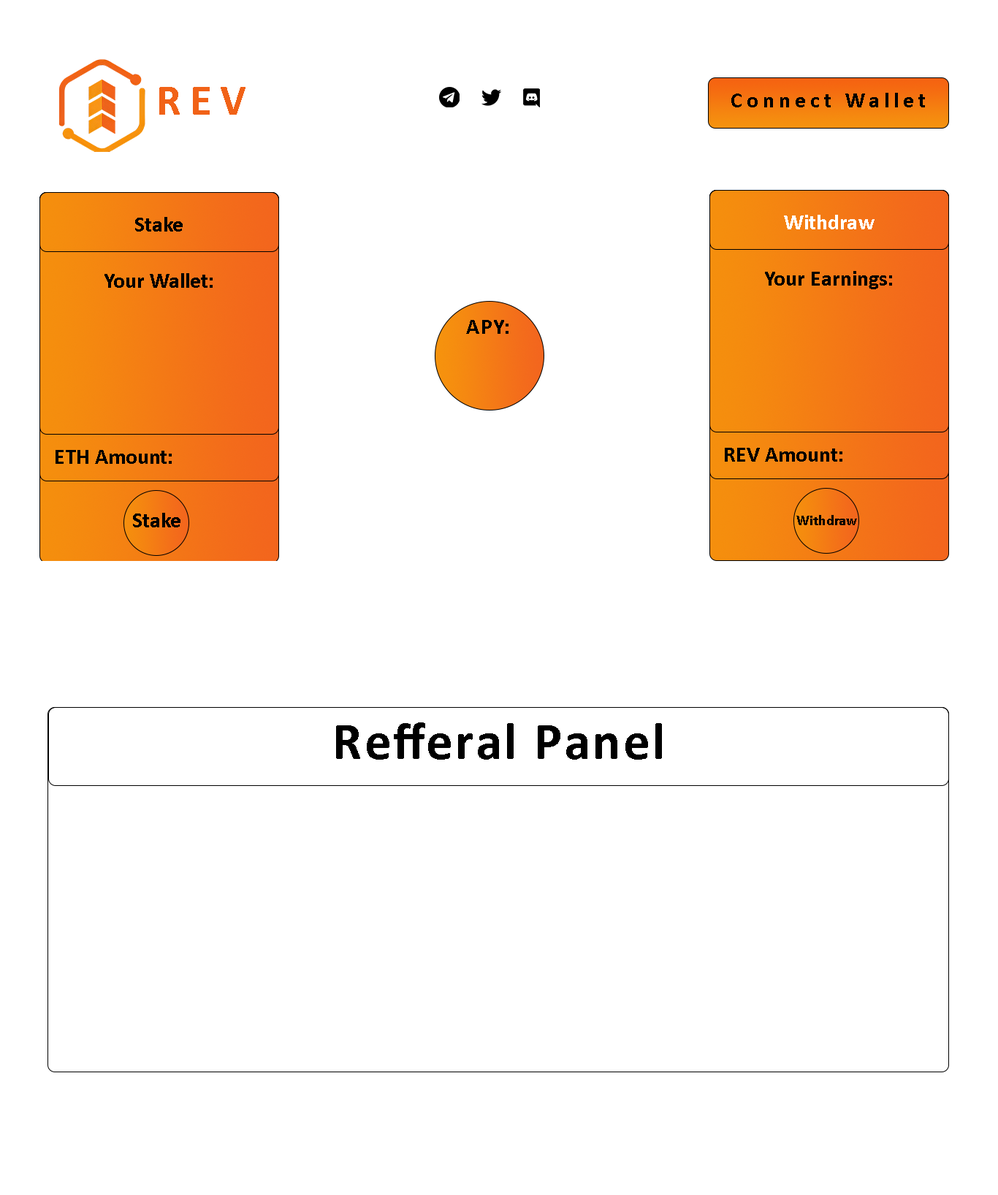
<style>
.page{position:relative;width:998px;height:1195px;background:#ffffff}
.page>*{position:absolute;margin:0}
.t1{font:43.8px "Calibri-Bold";letter-spacing:0.2em;color:#f16217}
.t2{font:21.9px "Calibri-Bold";letter-spacing:0.2em;color:#000000}
.t3{font:21.9px "Calibri-Bold";color:#000000}
.t4{font:21.9px "Calibri-Bold";color:#ffffff}
.t5{font:21.9px "Calibri-Bold";letter-spacing:0.05em;color:#000000}
.t6{font:14.6px "Calibri-Bold";color:#000000}
.t7{font:52.6px "Calibri-Bold";letter-spacing:0.05em;color:#000000}
</style>
<div class="page">
<p class="t1" style="left:159px;top:87px;width:86px;height:28px">REV</p>
<p class="t2" style="left:731px;top:93px;width:194px;height:14px">Connect Wallet</p>
<p class="t3" style="left:135px;top:217px;width:48px;height:15px">Stake</p>
<p class="t4" style="left:784px;top:215px;width:90px;height:14px">Withdraw</p>
<p class="t3" style="left:104px;top:273px;width:109px;height:15px">Your Wallet:</p>
<p class="t3" style="left:765px;top:271px;width:127px;height:18px">Your Earnings:</p>
<p class="t5" style="left:466px;top:320px;width:42px;height:14px">APY:</p>
<p class="t3" style="left:56px;top:450px;width:116px;height:14px">ETH Amount:</p>
<p class="t3" style="left:725px;top:448px;width:117px;height:14px">REV Amount:</p>
<p class="t3" style="left:133px;top:513px;width:47px;height:14px">Stake</p>
<p class="t6" style="left:796px;top:515px;width:61px;height:10px">Withdraw</p>
<p class="t7" style="left:336px;top:722px;width:326px;height:38px">Refferal Panel</p>
</div>
